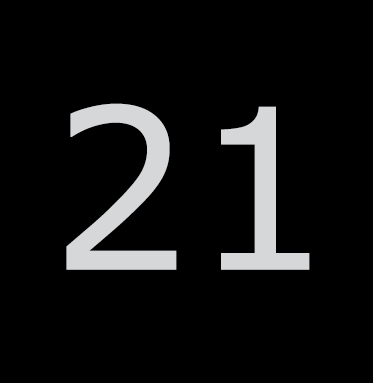
<style>
.page{position:relative;width:373px;height:383px;background:#000000}
.page>*{position:absolute;margin:0}
.t1{font:223.1px "Verdana";color:#d5d7d8}
</style>
<div class="page">
<p class="t1" style="left:66px;top:103px;width:244px;height:167px">21</p>
</div>
